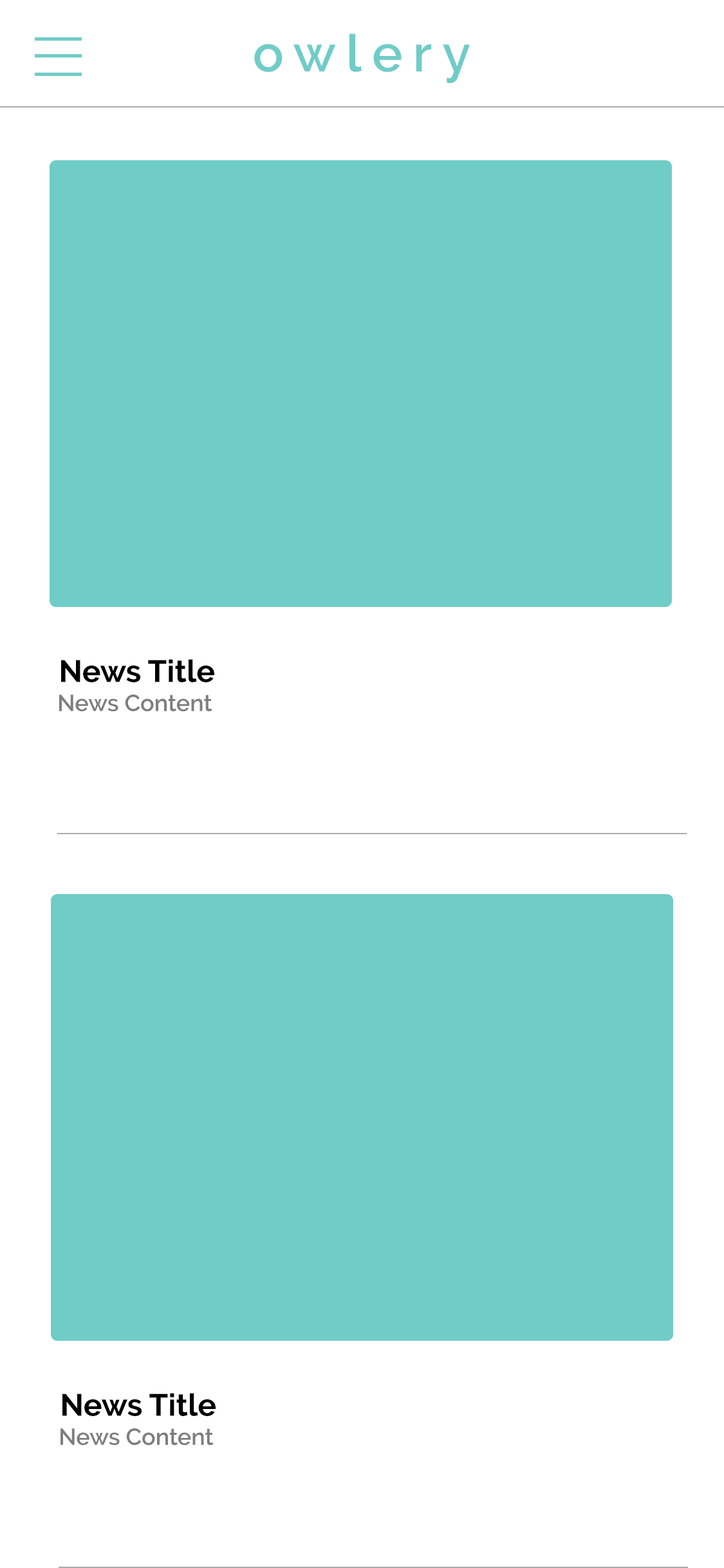
<style>
.page{position:relative;width:724px;height:1568px;background:#ffffff}
.page>*{position:absolute;margin:0}
.t1{font:51.5px "Raleway-SemiBold";letter-spacing:0.2em;color:#70ccc7}
.t2{font:30.9px "Raleway-Bold";color:#000000}
.t3{font:23.2px "Raleway-SemiBold";color:#7e7e7e}
</style>
<div class="page">
<p class="t1" style="left:254px;top:33px;width:216px;height:51px">owlery</p>
<p class="t2" style="left:61px;top:659px;width:153px;height:23px">News Title</p>
<p class="t3" style="left:59px;top:695px;width:153px;height:16px">News Content</p>
<p class="t2" style="left:62px;top:1393px;width:154px;height:23px">News Title</p>
<p class="t3" style="left:61px;top:1428px;width:153px;height:17px">News Content</p>
</div>
